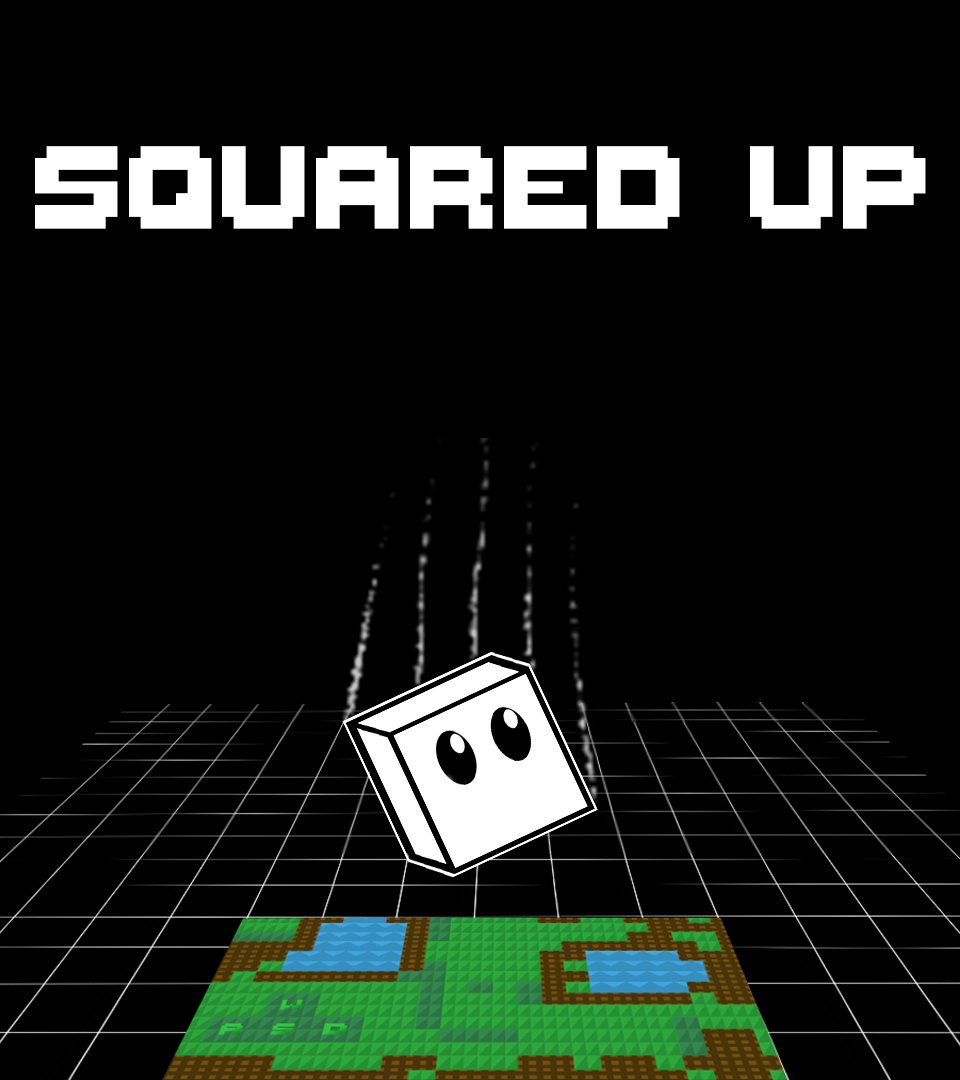
<style>
.page{position:relative;width:960px;height:1080px;background:#000000}
.page>*{position:absolute;margin:0}
.t1{font:187.5px "ThaleahFat";color:#ffffff}
</style>
<div class="page">
<p class="t1" style="left:35px;top:146px;width:891px;height:83px">SQUARED UP</p>
</div>
